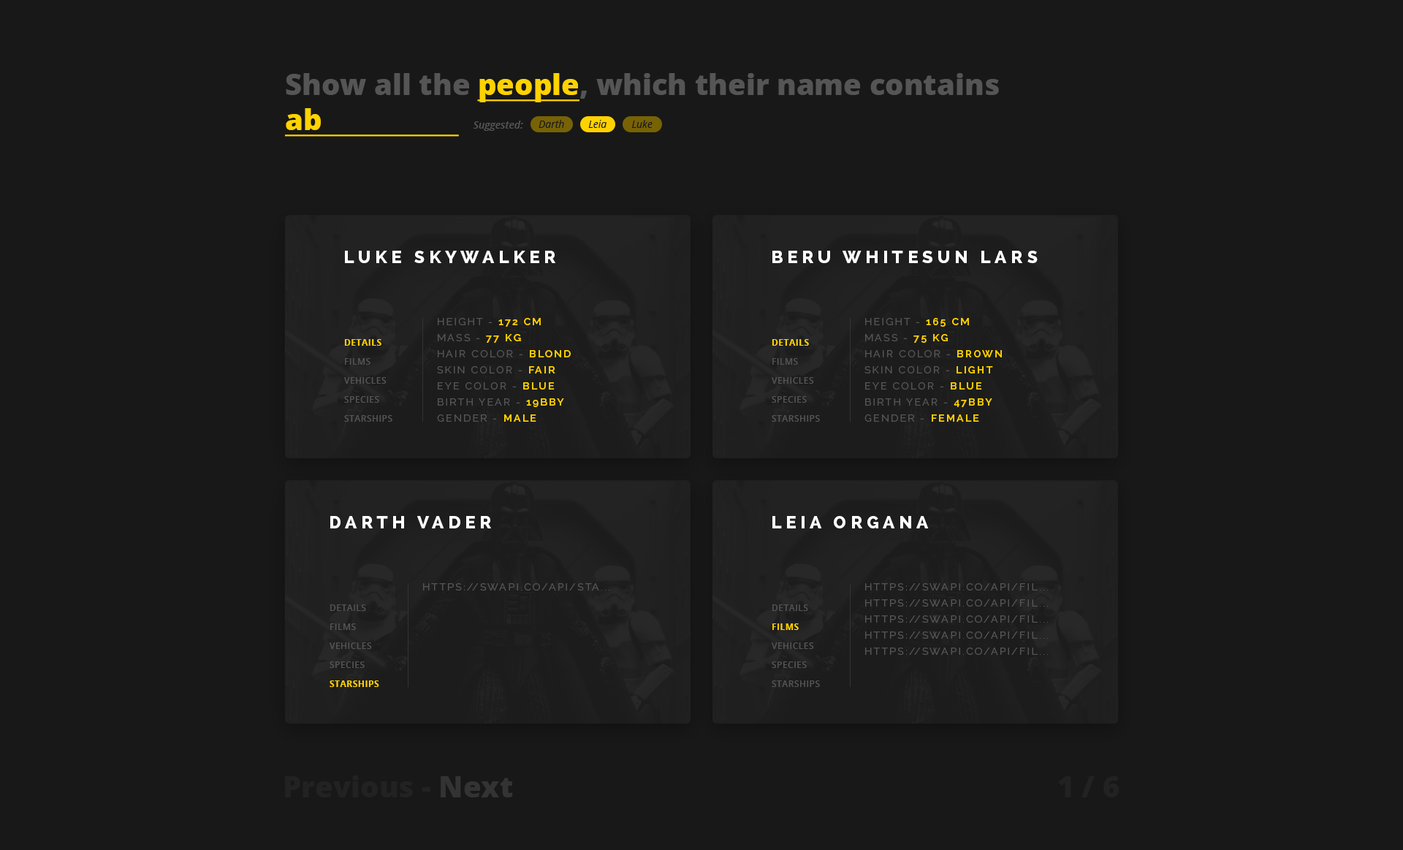
<style>
.page{position:relative;width:1403px;height:850px;background:#181818}
.page>*{position:absolute;margin:0}
.t1{font:29.2px "OpenSans-Extrabold";color:#555555}
.t2{font:29.2px "OpenSans-Extrabold";color:#ffd200;text-decoration:underline}
.t3{font:10.2px "OpenSans-SemiboldItalic";color:#555555}
.t4{font:10.2px "OpenSans-Italic";color:#181818}
.t5{font:17.5px "Raleway-ExtraBold";letter-spacing:0.24em;color:#ffffff;text-transform:uppercase}
.t6{font:10.2px/16.1px "Raleway-Regular";letter-spacing:0.16em;color:#555555;text-transform:uppercase}
.t7{font:10.2px/16.1px "Raleway-SemiBold";letter-spacing:0.16em;color:#ffd200;text-transform:uppercase}
.t8{font:8.8px/19px "OpenSans-Semibold";letter-spacing:0.04em;color:#555555;text-transform:uppercase}
.t9{font:8.8px/19px "OpenSans-Bold";letter-spacing:0.04em;color:#ffd200;text-transform:uppercase}
.t10{font:10.2px "Raleway-Regular";letter-spacing:0.16em;color:#555555;text-transform:uppercase}
.t11{font:29.2px "OpenSans-Extrabold";color:#222222}
.t12{font:29.2px "OpenSans-Extrabold";color:#333333}
</style>
<div class="page">
<p class="t1" style="left:285px;top:73px;width:714px;height:64px">Show all the <span class="t2">people</span>, which their name contains<br><span class="t2">ab</span></p>
<p class="t3" style="left:474px;top:121px;width:49px;height:10px">Suggested:</p>
<p class="t4" style="left:539px;top:120px;width:25px;height:8px">Darth</p>
<p class="t4" style="left:588px;top:120px;width:19px;height:8px">Leia</p>
<p class="t4" style="left:632px;top:120px;width:21px;height:8px">Luke</p>
<p class="t5" style="left:345px;top:251px;width:210px;height:12px">Luke Skywalker</p>
<p class="t5" style="left:772px;top:251px;width:266px;height:12px">Beru Whitesun lars</p>
<p class="t6" style="left:437px;top:318px;width:134px;height:104px">height - <span class="t7">172 cm<br></span>mass - <span class="t7">77 kg<br></span>hair color - <span class="t7">blond<br></span>skin color - <span class="t7">fair<br></span>eye color - <span class="t7">blue<br></span>birth year - <span class="t7">19bby<br></span>gender - <span class="t7">male</span></p>
<p class="t6" style="left:864px;top:318px;width:138px;height:104px">height - <span class="t7">165 cm<br></span>mass - <span class="t7">75 kg<br></span>hair color - <span class="t7">Brown<br></span>skin color - <span class="t7">Light<br></span>eye color - <span class="t7">blue<br></span>birth year - <span class="t7">47BBY<br></span>gender - <span class="t7">Female</span></p>
<p class="t8" style="left:344px;top:339px;width:48px;height:83px"><span class="t9">Details<br></span>Films<br>Vehicles<br>species<br>starships</p>
<p class="t8" style="left:772px;top:339px;width:48px;height:83px"><span class="t9">Details<br></span>Films<br>Vehicles<br>species<br>starships</p>
<p class="t5" style="left:330px;top:516px;width:161px;height:12px">Darth Vader</p>
<p class="t5" style="left:772px;top:516px;width:157px;height:12px">Leia Organa</p>
<p class="t10" style="left:423px;top:583px;width:186px;height:7px">https://swapi.co/api/sta...</p>
<p class="t6" style="left:865px;top:583px;width:183px;height:72px">https://swapi.co/api/fil...<br>https://swapi.co/api/fil...<br>https://swapi.co/api/fil...<br>https://swapi.co/api/fil...<br>https://swapi.co/api/fil...</p>
<p class="t8" style="left:330px;top:604px;width:49px;height:83px">Details<br>Films<br>Vehicles<br>species<br><span class="t9">Starships</span></p>
<p class="t8" style="left:772px;top:604px;width:48px;height:83px">Details<br><span class="t9">Films<br></span>Vehicles<br>species<br>starships</p>
<p class="t11" style="left:285px;top:775px;width:228px;height:22px">Previous - <span class="t12">Next</span></p>
<p class="t11" style="left:1058px;top:776px;width:62px;height:21px">1 / 6</p>
</div>
